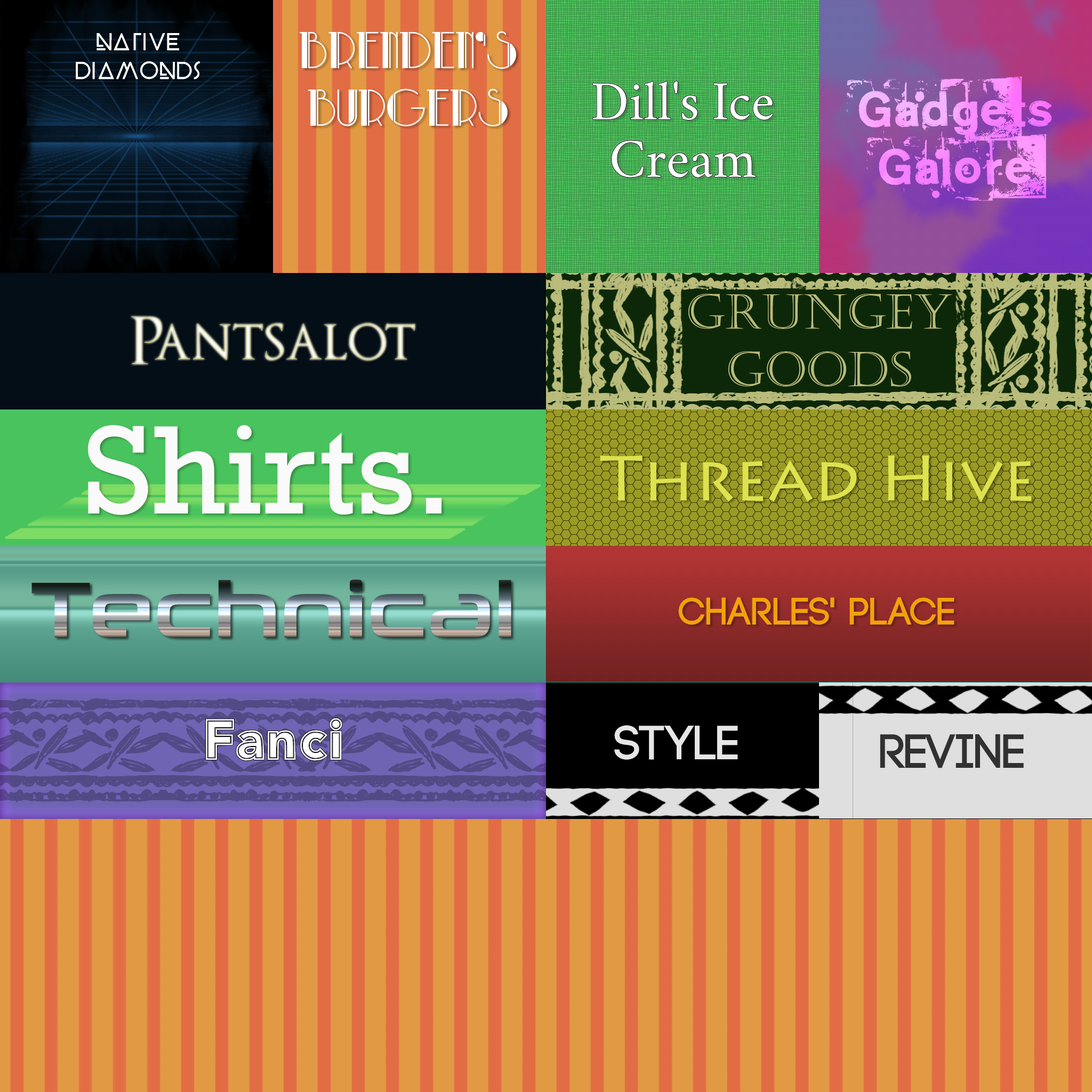
<style>
.page{position:relative;width:1092px;height:1092px;background:#e29944}
.page>*{position:absolute;margin:0}
.t1{font:24px "BEYNO";color:#ffffff}
.t2{font:48px "ParkLaneNF";color:#ffffff}
.t3{font:48px "NeoPrintM319"}
.t4{font:48px "CrimsonText-Roman";color:#ffffff}
.t5{font:48px "Castellar";color:#babc7b}
.t6{font:64px "OptimusPrinceps"}
.t7{font:128px "Rockwell";color:#fafafa}
.t8{font:64px "LithosPro-Regular";color:#dde24e}
.t9{font:80px "NeuropoliticalRg-Regular"}
.t10{font:38.4px "Code-Bold";color:#f3a207}
.t11{font:53.3px "Avenir-95Custom.Outerline";color:#fefefe}
.t12{font:48px "Code-Bold";color:#e6e6e6}
.t13{font:48px "Code-Bold";color:#313131}
</style>
<div class="page">
<p class="t1" style="left:76px;top:33px;width:124px;height:46px;text-align:center">Native<br>Diamonds</p>
<p class="t1" style="left:76px;top:33px;width:124px;height:46px;text-align:center">Native<br>Diamonds</p>
<p class="t2" style="left:300px;top:31px;width:216px;height:95px;text-align:center">Brenden’s<br>Burgers</p>
<p class="t3" style="left:847px;top:76px;width:205px;height:125px;text-align:center">Gadgets<br>Galore</p>
<p class="t3" style="left:847px;top:76px;width:205px;height:125px;text-align:center">Gadgets<br>Galore</p>
<p class="t4" style="left:592px;top:81px;width:181px;height:97px;text-align:center">Dill's Ice Cream</p>
<p class="t4" style="left:592px;top:81px;width:181px;height:97px;text-align:center">Dill's Ice Cream</p>
<p class="t5" style="left:688px;top:294px;width:264px;height:93px;text-align:center">Grungey<br>Goods</p>
<p class="t5" style="left:688px;top:294px;width:264px;height:93px;text-align:center">Grungey<br>Goods</p>
<p class="t6" style="left:131px;top:316px;width:284px;height:48px">Pantsalot</p>
<p class="t6" style="left:131px;top:316px;width:284px;height:48px">Pantsalot</p>
<p class="t7" style="left:88px;top:425px;width:353px;height:90px">Shirts.</p>
<p class="t7" style="left:88px;top:425px;width:353px;height:90px">Shirts.</p>
<p class="t8" style="left:600px;top:455px;width:432px;height:47px">Thread Hive</p>
<p class="t8" style="left:600px;top:455px;width:432px;height:47px">Thread Hive</p>
<p class="t9" style="left:31px;top:580px;width:480px;height:58px">Technical</p>
<p class="t9" style="left:31px;top:580px;width:480px;height:58px">Technical</p>
<p class="t10" style="left:678px;top:597px;width:276px;height:28px">Charles' Place</p>
<p class="t10" style="left:678px;top:597px;width:276px;height:28px">Charles' Place</p>
<p class="t11" style="left:206px;top:718px;width:136px;height:43px">Fanci</p>
<p class="t11" style="left:206px;top:718px;width:136px;height:43px">Fanci</p>
<p class="t12" style="left:614px;top:725px;width:124px;height:35px">Style</p>
<p class="t12" style="left:614px;top:725px;width:124px;height:35px">Style</p>
<p class="t13" style="left:880px;top:734px;width:144px;height:34px">Revine</p>
<p class="t13" style="left:880px;top:734px;width:144px;height:34px">Revine</p>
</div>
